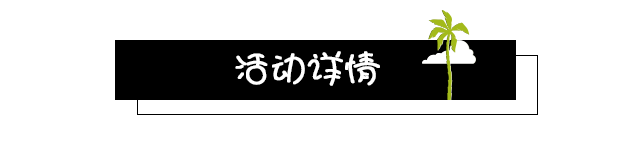
<style>
.page{position:relative;width:640px;height:156px;background:#ffffff}
.page>*{position:absolute;margin:0}
.t1{font:36px "HYj2gj";color:#ffffff;font-weight:bold}
</style>
<div class="page">
<p class="t1" style="left:235px;top:51px;width:145px;height:35px">活动详情</p>
</div>
